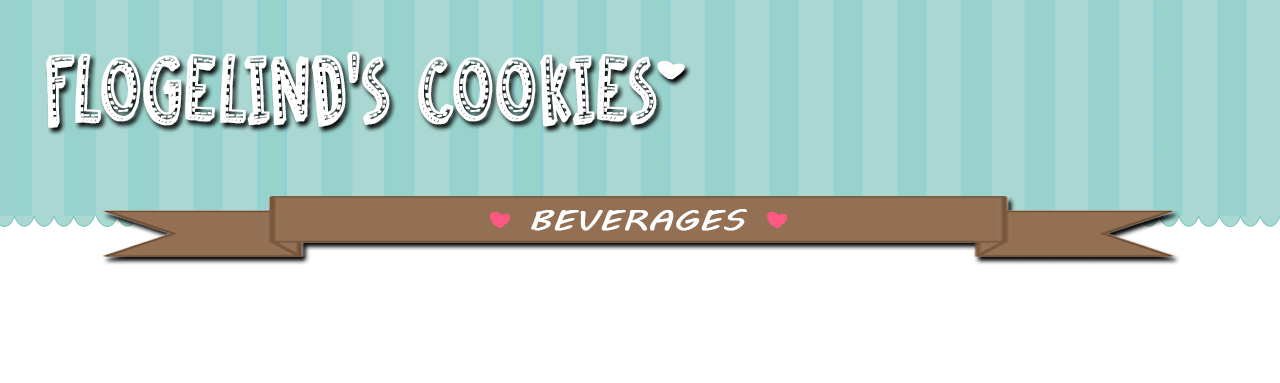
<style>
.page{position:relative;width:1280px;height:383px;background:#ffffff}
.page>*{position:absolute;margin:0}
.t1{font:84.5px "DKCosmoStitch";color:#ffffff;font-weight:bold;scale:0.87 1}
.t2{font:28.4px "MVBoli";color:#ffffff;font-weight:bold;scale:1.27 1}
</style>
<div class="page">
<p class="t1" style="left:46px;top:51px;width:611px;height:77px">FLOGELIND’S COOKIES</p>
<p class="t2" style="left:531px;top:209px;width:216px;height:22px">BEVERAGES</p>
</div>
